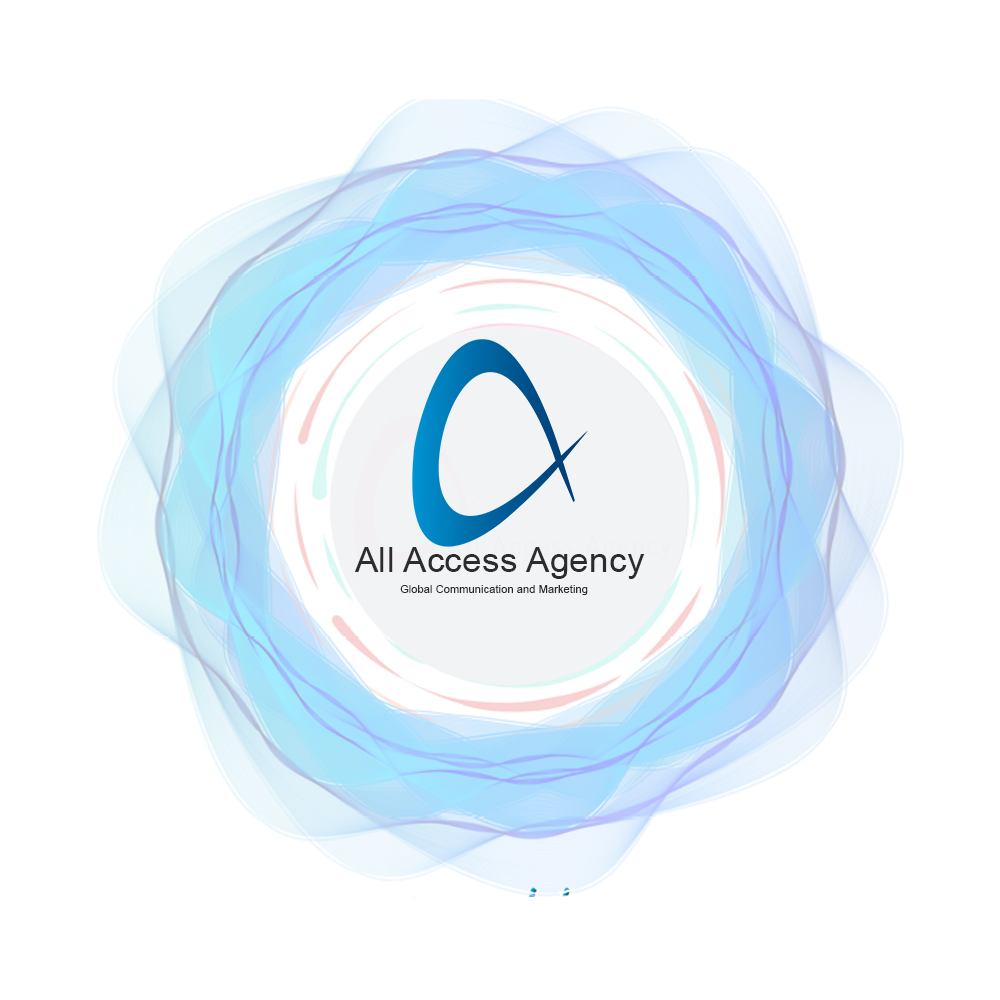
<style>
.page{position:relative;width:1000px;height:1000px;background:#ffffff}
.page>*{position:absolute;margin:0}
.t1{font:35px "ArialMT";letter-spacing:0.01em;color:#2b2c2d}
.t2{font:11px "ArialMT";letter-spacing:0.01em;color:#2b2c2d}
</style>
<div class="page">
<p class="t1" style="left:354px;top:547px;width:291px;height:32px">All Access Agency</p>
<p class="t2" style="left:400px;top:585px;width:188px;height:10px">Global Communication and Marketing</p>
</div>
